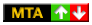
<style>
.page{position:relative;width:92px;height:25px;background:#ffffff}
.page>*{position:absolute;margin:0}
.t1{font:15px "HelveticaNeue-Bold"}
</style>
<div class="page">
<p class="t1" style="left:12px;top:7px;width:31px;height:11px">MTA</p>
</div>
